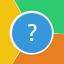
<style>
.page{position:relative;width:64px;height:64px;background:#3498db}
.page>*{position:absolute;margin:0}
.t1{font:24px "Ubuntu";color:#ffffff}
</style>
<div class="page">
<p class="t1" style="left:28px;top:24px;width:9px;height:17px">?</p>
</div>
